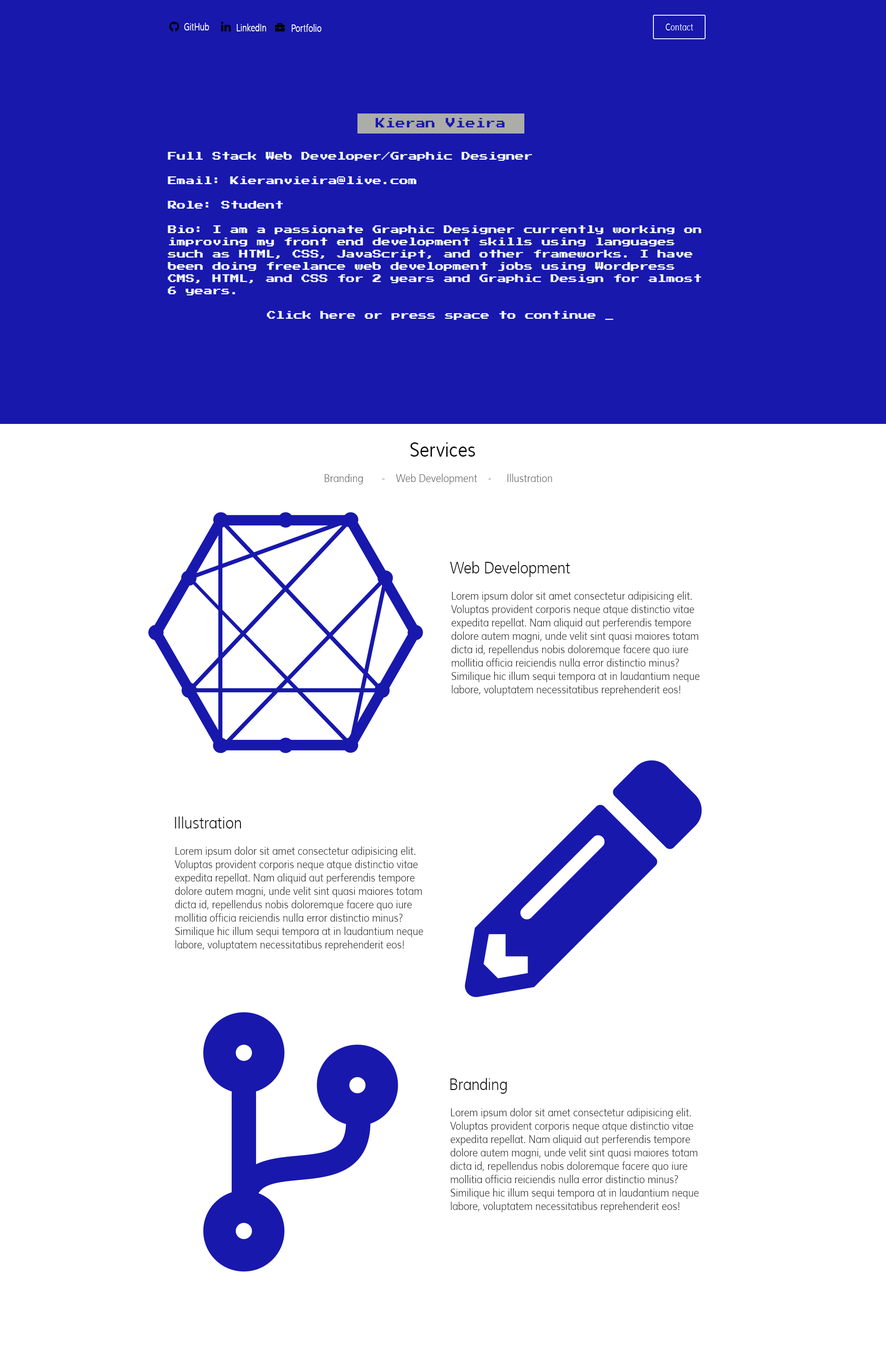
<style>
.page{position:relative;width:886px;height:1346px;background:#ffffff}
.page>*{position:absolute;margin:0}
.t1{font:10.5px "Muli";letter-spacing:0.001em;color:#ffffff;scale:0.73 1}
.t2{font:9.9px "Muli";letter-spacing:0.001em;color:#ffffff;scale:0.75 1}
.t3{font:20.2px "Muli";letter-spacing:0.001em;color:#111111;scale:0.84 1}
.t4{font:11px "Muli-Light";letter-spacing:0.001em;color:#676767;scale:0.84 1}
.t5{font:16.2px "Muli-Light";letter-spacing:0.001em;color:#000000;scale:0.84 1}
.t6{font:11px/13.4px "Muli-Light";letter-spacing:0.001em;color:#2e2e2e;scale:0.84 1}
</style>
<div class="page">
<p class="t1" style="left:184px;top:23px;width:25px;height:7px">GitHub</p>
<p class="t1" style="left:237px;top:24px;width:29px;height:7px">LinkedIn</p>
<p class="t1" style="left:292px;top:24px;width:30px;height:8px">Portfolio</p>
<p class="t2" style="left:665px;top:24px;width:28px;height:6px">Contact</p>
<p class="t3" style="left:410px;top:442px;width:65px;height:15px">Services</p>
<p class="t4" style="left:324px;top:474px;width:228px;height:10px">Branding    -    Web Development    -  Illustration</p>
<p class="t5" style="left:450px;top:561px;width:120px;height:16px">Web Development</p>
<p class="t6" style="left:451px;top:591px;width:248px;height:105px">Lorem ipsum dolor sit amet consectetur adipisicing elit. Voluptas provident corporis neque atque distinctio vitae expedita repellat. Nam aliquid aut perferendis tempore dolore autem magni, unde velit sint quasi maiores totam dicta id, repellendus nobis doloremque facere quo iure mollitia officia reiciendis nulla error distinctio minus? Similique hic illum sequi tempora at in laudantium neque labore, voluptatem necessitatibus reprehenderit eos!</p>
<p class="t5" style="left:175px;top:817px;width:66px;height:12px">Illustration</p>
<p class="t6" style="left:174px;top:847px;width:249px;height:104px">Lorem ipsum dolor sit amet consectetur adipisicing elit. Voluptas provident corporis neque atque distinctio vitae expedita repellat. Nam aliquid aut perferendis tempore dolore autem magni, unde velit sint quasi maiores totam dicta id, repellendus nobis doloremque facere quo iure mollitia officia reiciendis nulla error distinctio minus? Similique hic illum sequi tempora at in laudantium neque labore, voluptatem necessitatibus reprehenderit eos!</p>
<p class="t5" style="left:450px;top:1078px;width:57px;height:16px">Branding</p>
<p class="t6" style="left:450px;top:1108px;width:248px;height:104px">Lorem ipsum dolor sit amet consectetur adipisicing elit. Voluptas provident corporis neque atque distinctio vitae expedita repellat. Nam aliquid aut perferendis tempore dolore autem magni, unde velit sint quasi maiores totam dicta id, repellendus nobis doloremque facere quo iure mollitia officia reiciendis nulla error distinctio minus? Similique hic illum sequi tempora at in laudantium neque labore, voluptatem necessitatibus reprehenderit eos!</p>
</div>
